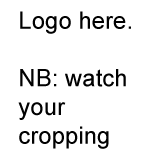
<style>
.page{position:relative;width:158px;height:158px;background:#ffffff}
.page>*{position:absolute;margin:0}
.t1{font:24px "ArialMT";color:#010101}
</style>
<div class="page">
<p class="t1" style="left:18px;top:11px;width:113px;height:138px">Logo here.<br><br>NB: watch<br>your<br>cropping</p>
</div>
